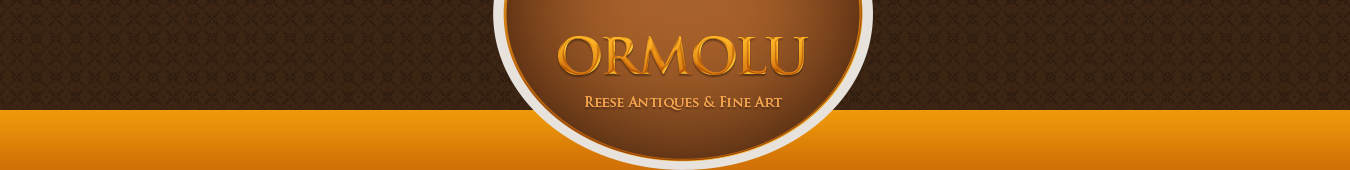
<style>
.page{position:relative;width:1350px;height:170px}
.page>*{position:absolute;margin:0}
.t1{font:58.6px "TrajanPro-Bold";letter-spacing:-0.03em}
.t2{font:13.5px "TrajanPro-Bold";color:#f4a34d}
</style>
<div class="page">
<p class="t1" style="left:558px;top:36px;width:251px;height:39px">ormolu</p>
<p class="t2" style="left:584px;top:96px;width:198px;height:14px">Reese Antiques &amp; Fine Art</p>
</div>
